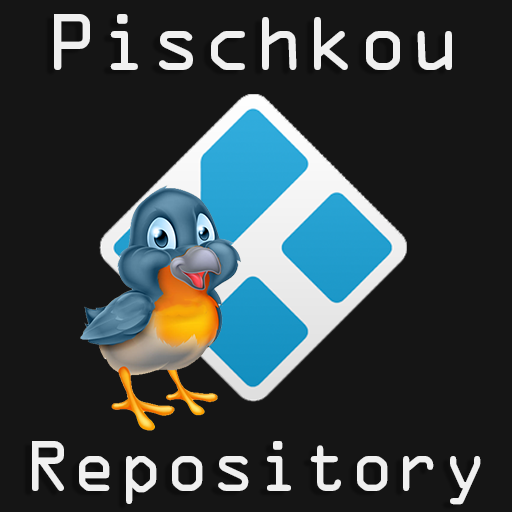
<style>
.page{position:relative;width:512px;height:512px;background:#151515}
.page>*{position:absolute;margin:0}
.t1{font:72px "OCRAStd";color:#f0f0f0}
.t2{font:64.3px "OCRAStd";color:#f0f0f0}
</style>
<div class="page">
<p class="t1" style="left:54px;top:14px;width:398px;height:56px">Pischkou</p>
<p class="t2" style="left:32px;top:441px;width:449px;height:64px">Repository</p>
</div>
